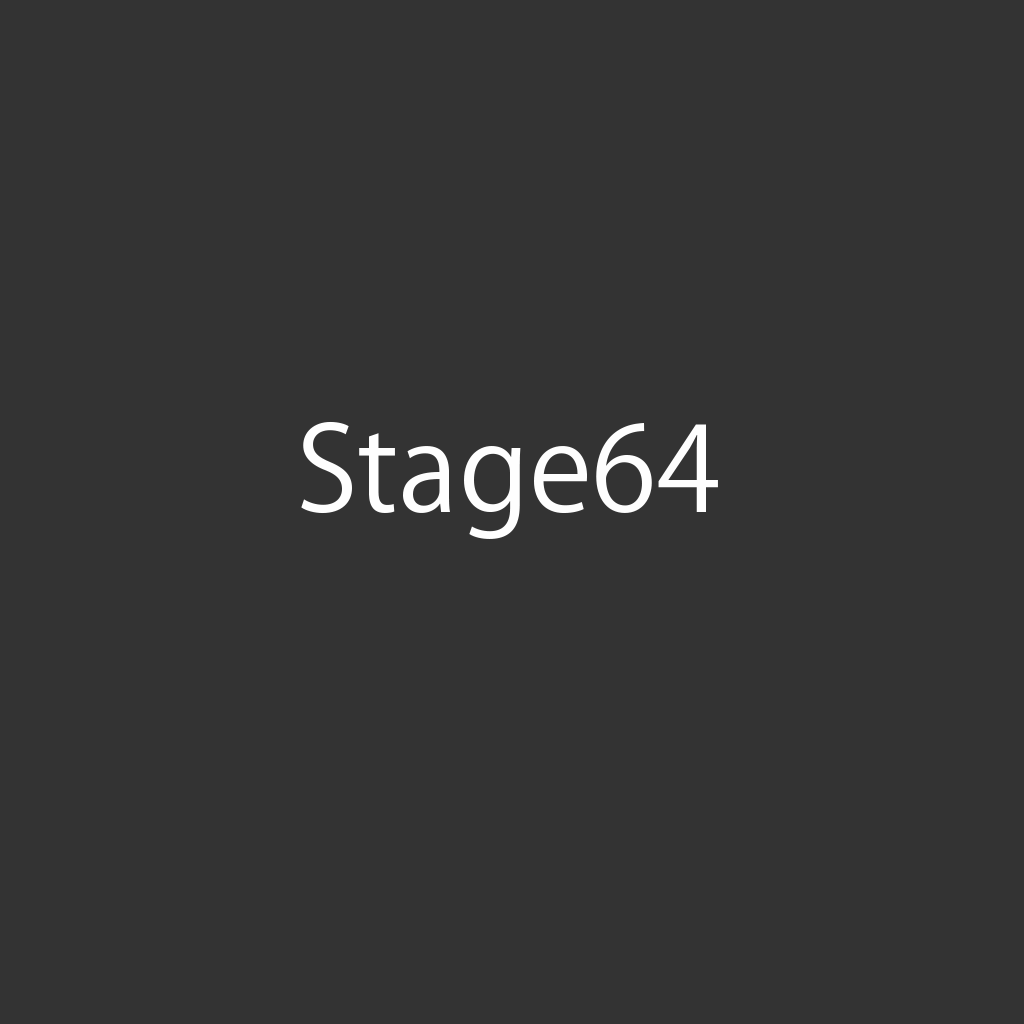
<style>
.page{position:relative;width:1024px;height:1024px;background:#333333}
.page>*{position:absolute;margin:0}
.t1{font:116.7px "KozGoPr6N-Regular";color:#fefefe}
</style>
<div class="page">
<p class="t1" style="left:301px;top:421px;width:417px;height:118px">Stage64</p>
</div>
